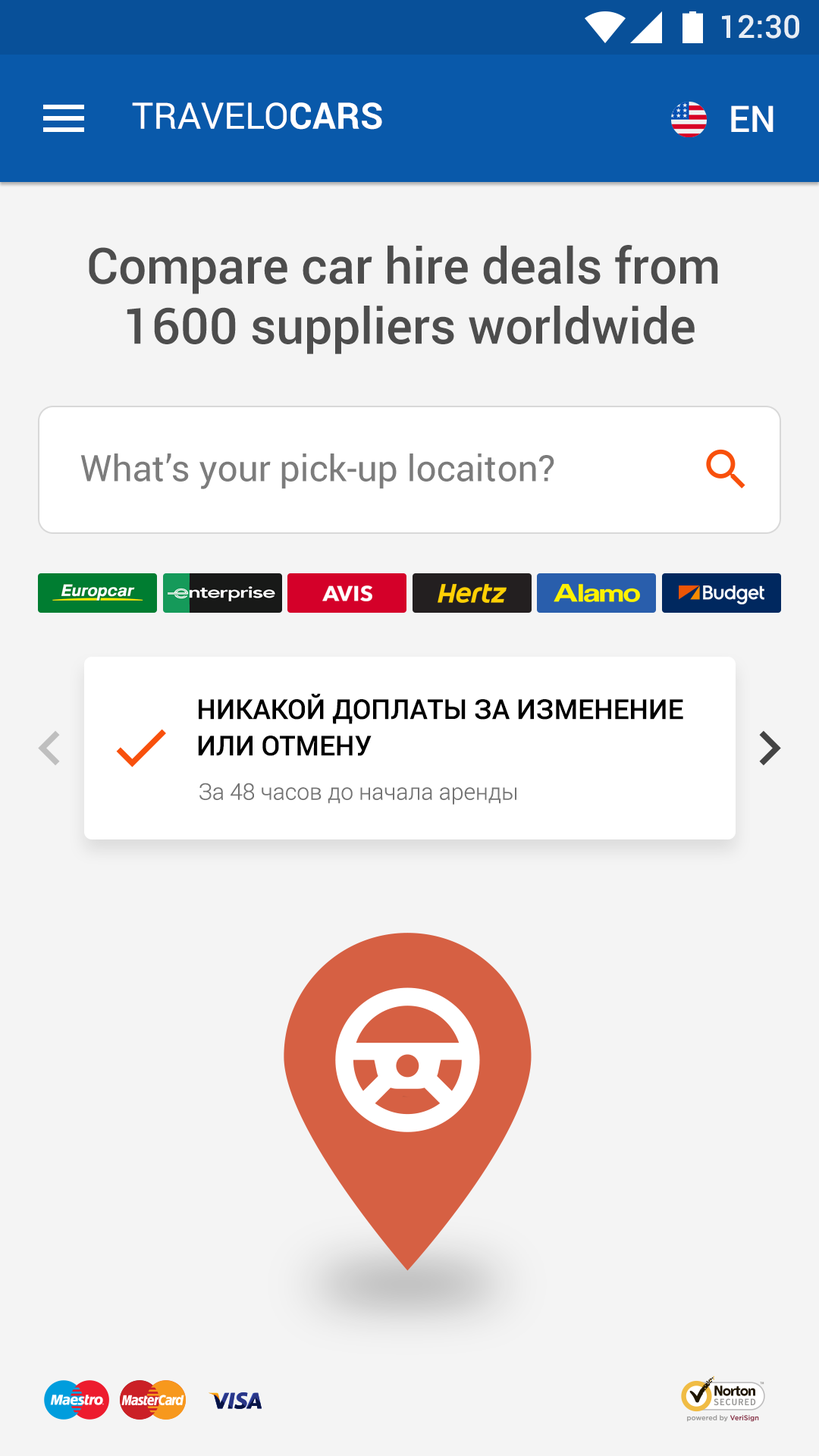
<style>
.page{position:relative;width:819px;height:1456px;background:#f4f4f4}
.page>*{position:absolute;margin:0}
.t1{font:31.8px "Roboto-Medium";color:#e7eef5}
.t2{font:36.4px "Roboto-Regular";color:#ffffff}
.t3{font:36.4px "Roboto-Bold";color:#ffffff}
.t4{font:36.4px "Roboto-Medium";color:#ffffff}
.t5{font:50px "Roboto-Medium";color:#4d4d4d}
.t6{font:36.4px "Roboto-Regular";color:#7c7c7c}
.t7{font:27.3px/36.4px "Roboto-Medium";color:#000000;text-transform:uppercase}
.t8{font:22.7px "Roboto-Light";color:#737373}
</style>
<div class="page">
<p class="t1" style="left:722px;top:14px;width:77px;height:25px">12:30</p>
<p class="t2" style="left:132px;top:102px;width:250px;height:28px">TRAVELO<span class="t3">CARS</span></p>
<p class="t4" style="left:731px;top:105px;width:42px;height:27px">EN</p>
<p class="t5" style="left:89px;top:245px;width:629px;height:109px;text-align:center">Compare car hire deals from <br>1600 suppliers worldwide</p>
<p class="t6" style="left:80px;top:453px;width:474px;height:36px">What’s your pick-up locaiton?</p>
<p class="t7" style="left:198px;top:693px;width:485px;height:63px">Никакой доплаты за изменение <br>или отмену</p>
<p class="t8" style="left:199px;top:783px;width:317px;height:22px">За 48 часов до начала аренды</p>
</div>
